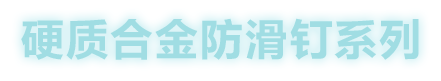
<style>
.page{position:relative;width:441px;height:81px;background:#ffffff}
.page>*{position:absolute;margin:0}
.t1{font:44.8px "FZLTCHJW--GB1-0";color:#a0dde3;text-transform:uppercase}
</style>
<div class="page">
<p class="t1" style="left:21px;top:18px;width:398px;height:42px">硬质合金防滑钉系列</p>
</div>
